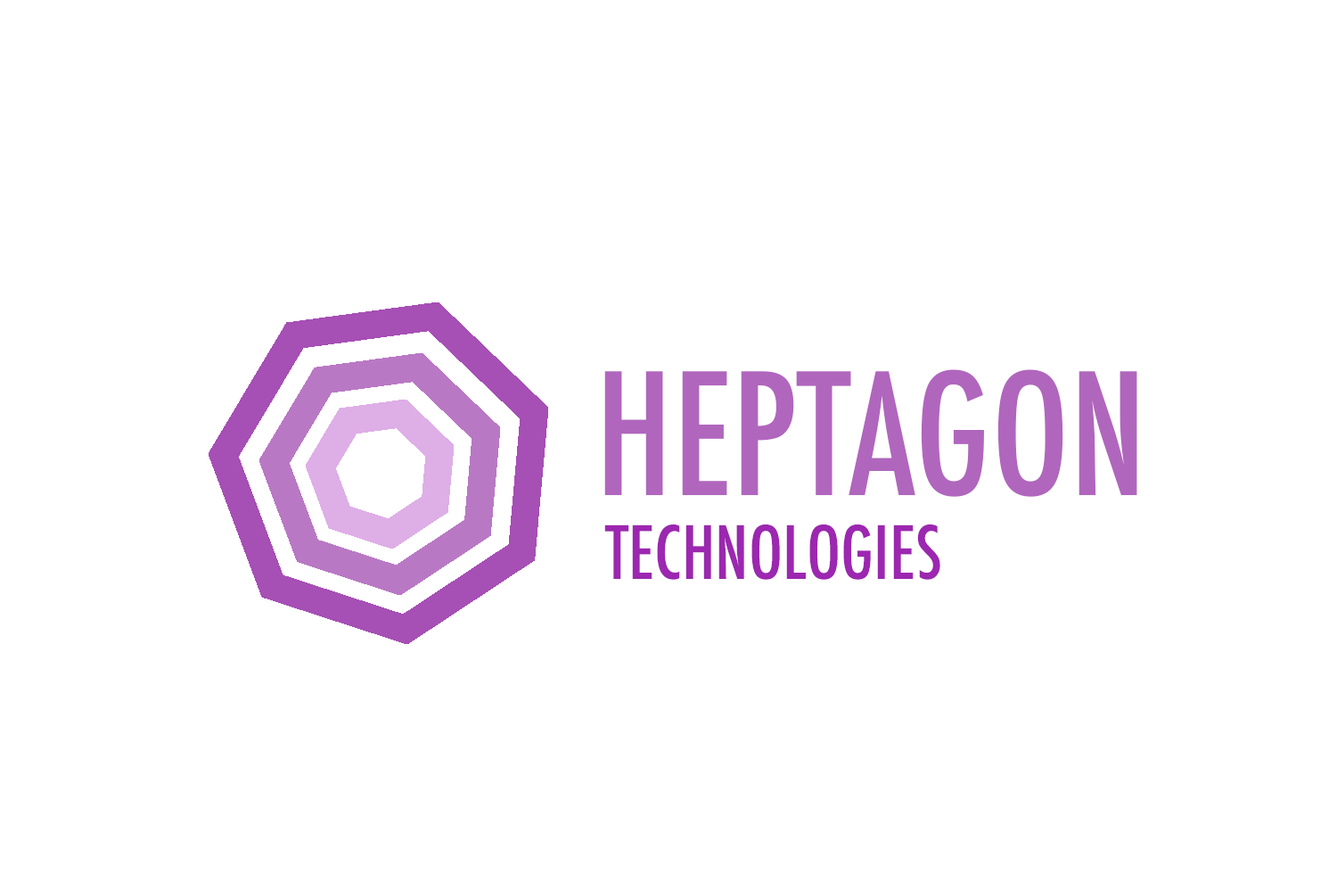
<style>
.page{position:relative;width:1337px;height:892px;background:#ffffff}
.page>*{position:absolute;margin:0}
.t1{font:164.1px "Futura-CondensedMedium";color:#b066bd}
.t2{font:71.3px "Futura-CondensedMedium";color:#9c27b0}
</style>
<div class="page">
<p class="t1" style="left:605px;top:369px;width:533px;height:128px">HEPTAGON</p>
<p class="t2" style="left:605px;top:523px;width:336px;height:57px">TECHNOLOGIES</p>
</div>
